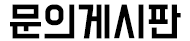
<style>
.page{position:relative;width:190px;height:41px;background:#ffffff}
.page>*{position:absolute;margin:0}
.t1{font:36px "BMDoHyeon";color:#000000}
</style>
<div class="page">
<p class="t1" style="left:10px;top:4px;width:171px;height:35px">문의게시판</p>
</div>
